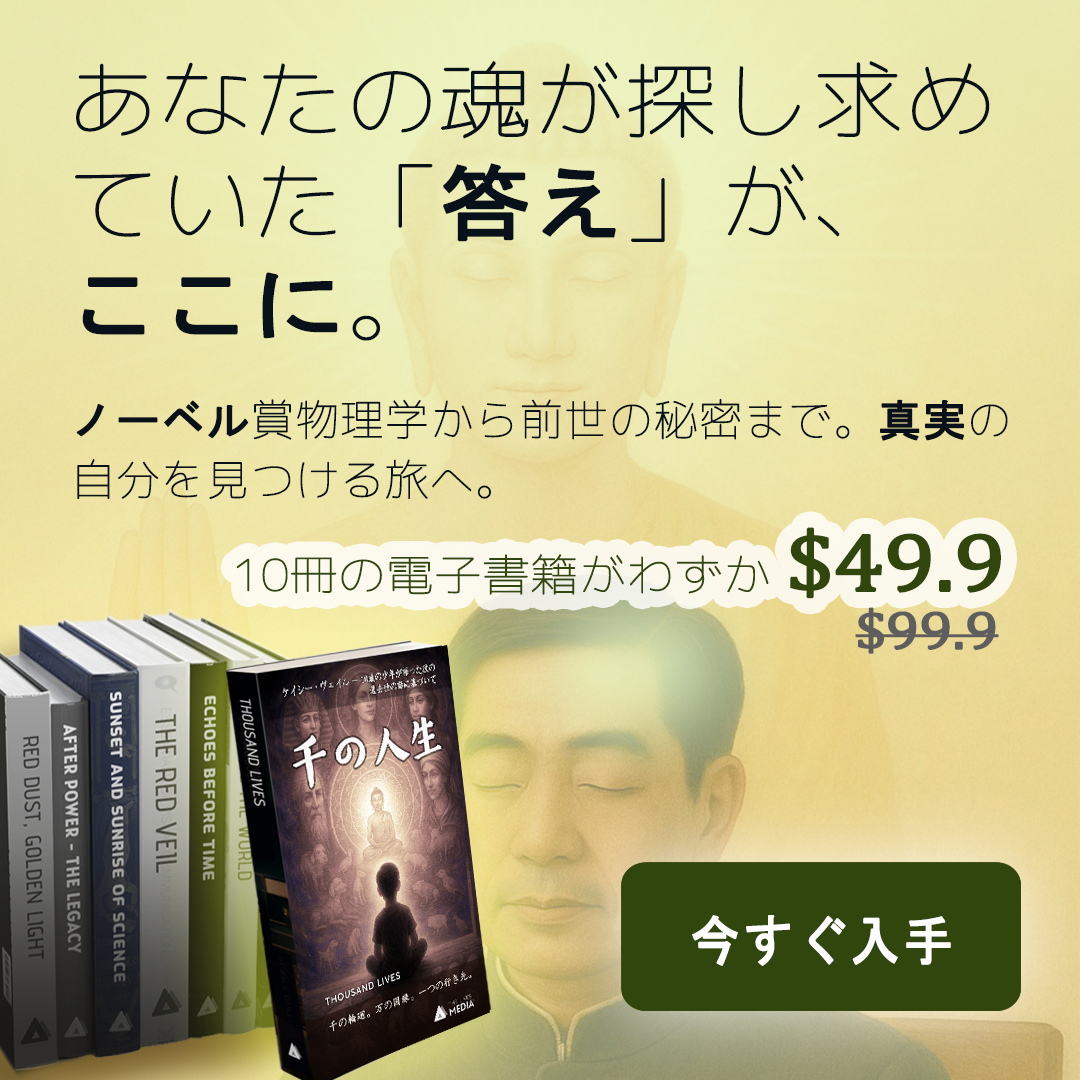
<style>
.page{position:relative;width:1080px;height:1080px}
.page>*{position:absolute;margin:0}
.t1{font:82.8px/102px "Chogokuboso-Gothic";letter-spacing:-0.015em;color:#08101a;font-weight:bold;scale:1.11 1}
.t2{font:82.8px/102px "MS-Gothic";letter-spacing:-0.015em;color:#08101a;font-weight:bold;scale:1.11 1}
.t3{font:43.2px/60px "Chogokuboso-Gothic";letter-spacing:0.01em;color:#08101a;font-weight:bold}
.t4{font:43.2px/60px "MS-Gothic";letter-spacing:0.01em;color:#08101a;font-weight:bold}
.t5{font:43.2px "Chogokuboso-Gothic";letter-spacing:-0.025em;color:#31460c;font-weight:bold;scale:1.11 1}
.t6{font:54px "Cambria";letter-spacing:-0.025em;color:#31460c;font-weight:bold;scale:1.11 1}
.t7{font:82.8px "Cambria";letter-spacing:-0.025em;color:#31460c;font-weight:bold;scale:1.11 1}
.t8{font:54px "Cambria";letter-spacing:-0.025em;color:#5f5e5e;font-weight:bold;scale:1.11 1}
.t9{font:55px "MS-Gothic";letter-spacing:0.05em;color:#fefefe;font-weight:bold;scale:0.9 1}
</style>
<div class="page">
<p class="t1" style="left:75px;top:61px;width:915px;height:280px">あなたの魂が探し求めていた「<span class="t2">答え</span>」が、<br><span class="t2">ここに</span>。</p>
<p class="t3" style="left:76px;top:399px;width:932px;height:100px"><span class="t4">ノーベル</span>賞物理学から前世の秘密まで。<span class="t4">真実</span>の自分を見つける旅へ。</p>
<p class="t5" style="left:236px;top:527px;width:765px;height:72px"><span class="t6"><br></span>10冊の電子書籍がわずか <span class="t7">$49.9</span></p>
<p class="t8" style="left:855px;top:607px;width:144px;height:47px">$99.9</p>
<p class="t9" style="left:692px;top:915px;width:259px;height:51px">今すぐ入手</p>
</div>
